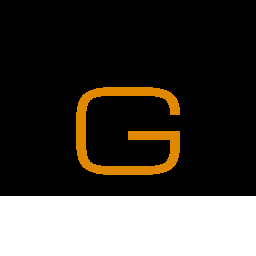
<style>
.page{position:relative;width:256px;height:256px;background:#000000}
.page>*{position:absolute;margin:0}
.t1{font:112px "Michroma";color:#df8800}
</style>
<div class="page">
<p class="t1" style="left:76px;top:87px;width:104px;height:88px">G</p>
</div>
